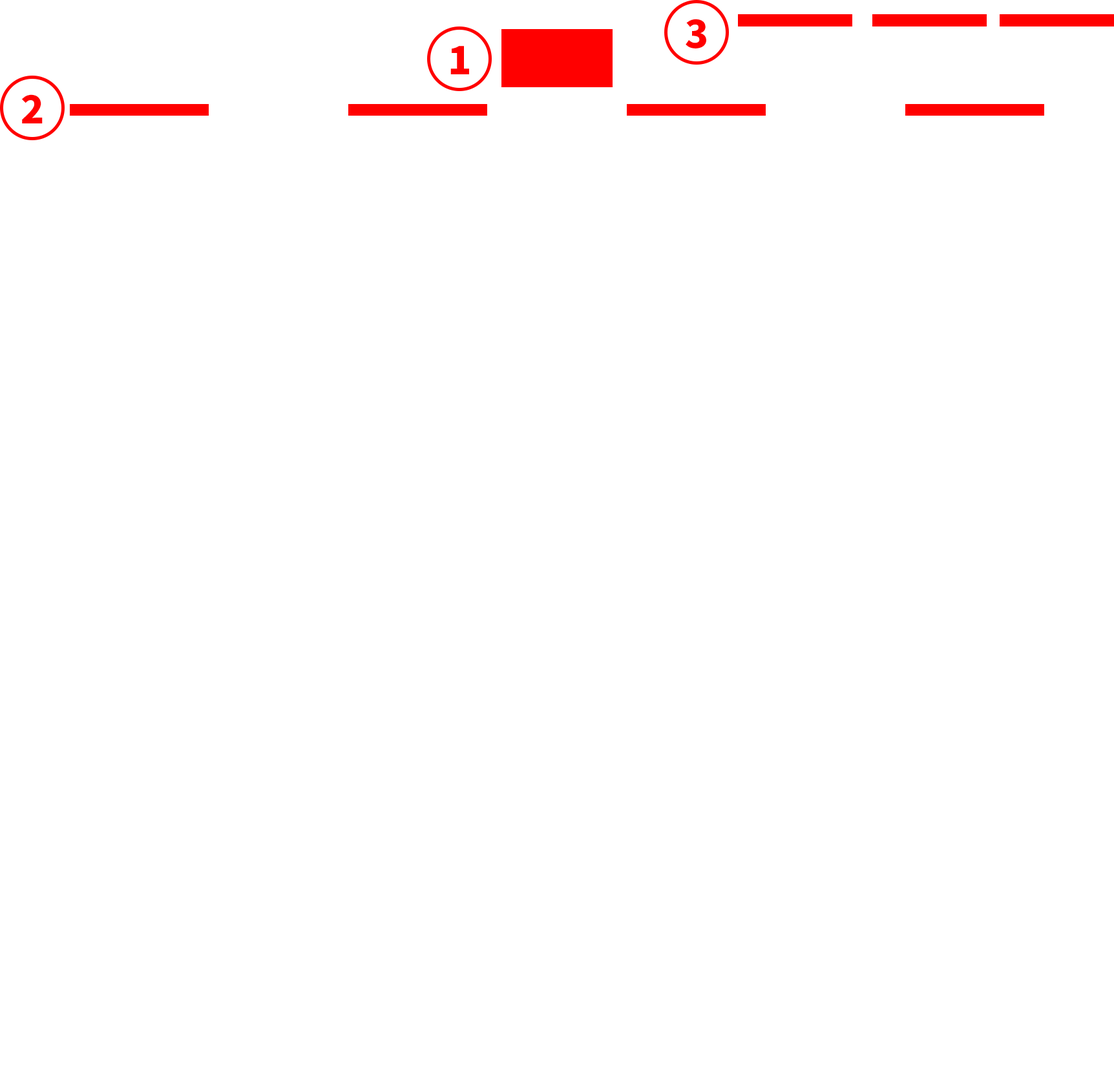
<style>
.page{position:relative;width:1114px;height:1070px;background:#ffffff}
.page>*{position:absolute;margin:0}
.t1{font:38.8px "NotoSansKR-Black";color:#ff0000}
</style>
<div class="page">
<p class="t1" style="left:686px;top:19px;width:20px;height:29px">3</p>
<p class="t1" style="left:450px;top:46px;width:19px;height:28px">1</p>
<p class="t1" style="left:21px;top:94px;width:22px;height:29px">2</p>
</div>
